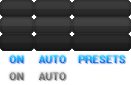
<style>
.page{position:relative;width:131px;height:85px;background:#ffffff}
.page>*{position:absolute;margin:0}
.t1{font:9px "System";letter-spacing:0.05em}
</style>
<div class="page">
<p class="t1" style="left:9px;top:55px;width:15px;height:8px">ON</p>
<p class="t1" style="left:39px;top:55px;width:27px;height:8px">AUTO</p>
<p class="t1" style="left:78px;top:55px;width:47px;height:8px">PRESETS</p>
</div>
